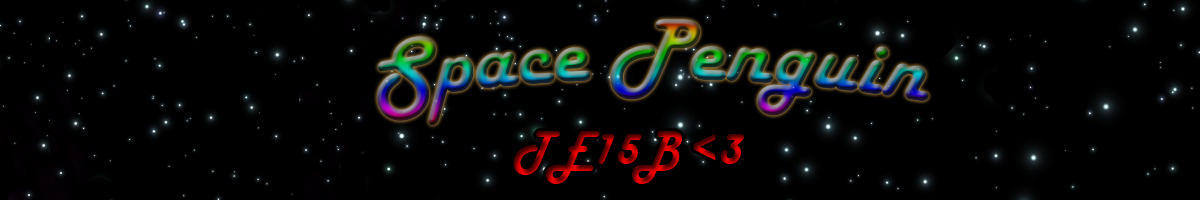
<style>
.page{position:relative;width:1200px;height:200px;background:#000000}
.page>*{position:absolute;margin:0}
.t1{font:90px "HarlowSolid"}
</style>
<div class="page">
<p class="t1" style="left:377px;top:19px;width:552px;height:107px">Space Penguin</p>
</div>
